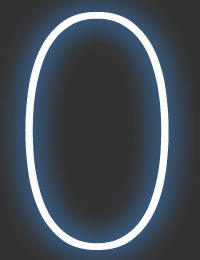
<style>
.page{position:relative;width:200px;height:260px;background:#333333}
.page>*{position:absolute;margin:0}
.t1{font:325px "BaiduanNumber";color:#ffffff}
</style>
<div class="page">
<p class="t1" style="left:25px;top:12px;width:144px;height:238px">0</p>
</div>
